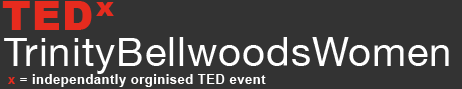
<style>
.page{position:relative;width:462px;height:89px;background:#333333}
.page>*{position:absolute;margin:0}
.t1{font:40px "Arial-Black";letter-spacing:0.025em;color:#e62b1e}
.t2{font:26.7px "Arial-Black";letter-spacing:0.025em;color:#e62b1e}
.t3{font:40px "HelveticaNeue";letter-spacing:0.025em;color:#ffffff}
.t4{font:13.3px "Arial-BoldMT";letter-spacing:0.025em;color:#ffffff}
.t5{font:13.3px "Arial-BoldMT";letter-spacing:0.025em;color:#e62b1e}
</style>
<div class="page">
<p class="t1" style="left:2px;top:1px;width:90px;height:29px">TED</p>
<p class="t2" style="left:96px;top:2px;width:18px;height:14px">x</p>
<p class="t3" style="left:4px;top:37px;width:445px;height:37px">TrinityBellwoodsWomen</p>
<p class="t4" style="left:8px;top:74px;width:258px;height:13px"><span class="t5">x </span>= independantly orginised TED event</p>
</div>
